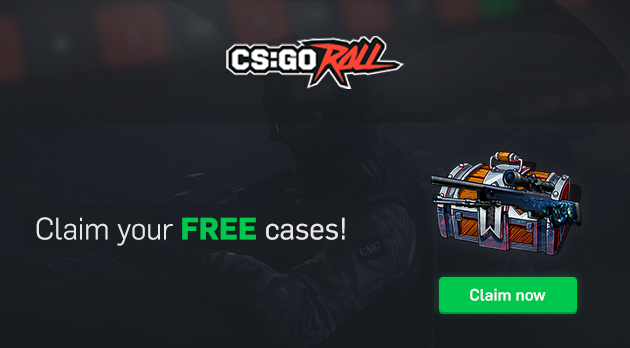
<style>
.page{position:relative;width:630px;height:348px}
.page>*{position:absolute;margin:0}
.t1{font:30px "Flama-Light";color:#e7e7e7}
.t2{font:30px "Flama-Bold";color:#00c74d}
.t3{font:30px "Flama-Book";color:#e7e7e7}
.t4{font:16px "Flama-Medium";color:#ffffff}
</style>
<div class="page">
<p class="t1" style="left:36px;top:217px;width:309px;height:29px">Claim your <span class="t2">FREE </span><span class="t3">cases!</span></p>
<p class="t4" style="left:470px;top:288px;width:76px;height:13px">Claim now</p>
</div>
